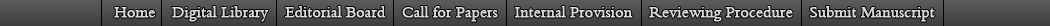
<style>
.page{position:relative;width:1050px;height:26px}
.page>*{position:absolute;margin:0}
.t1{font:15.6px "TraditionalArabic";color:#dedada;font-weight:bold}
</style>
<div class="page">
<p class="t1" style="left:114px;top:6px;width:821px;height:16px">Home    Digital Library    Editorial Board    Call for Papers    Internal Provision    Reviewing Procedure    Submit Manuscript</p>
</div>
